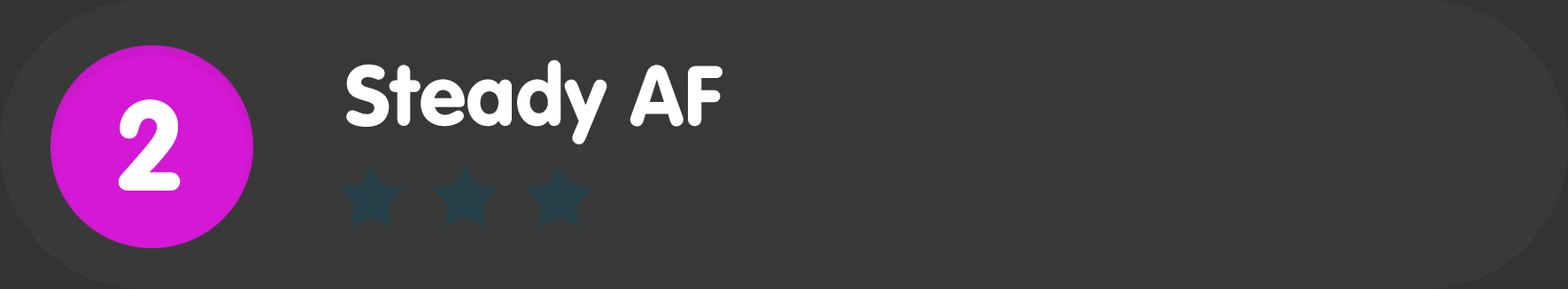
<style>
.page{position:relative;width:1568px;height:289px;background:#393939}
.page>*{position:absolute;margin:0}
.t1{font:88.5px "VAGRundschriftD";color:#ffffff}
.t2{font:132.8px "VAGRundschriftD";color:#ffffff}
</style>
<div class="page">
<p class="t1" style="left:346px;top:59px;width:376px;height:85px">Steady AF</p>
<p class="t2" style="left:118px;top:99px;width:63px;height:91px">2</p>
</div>
